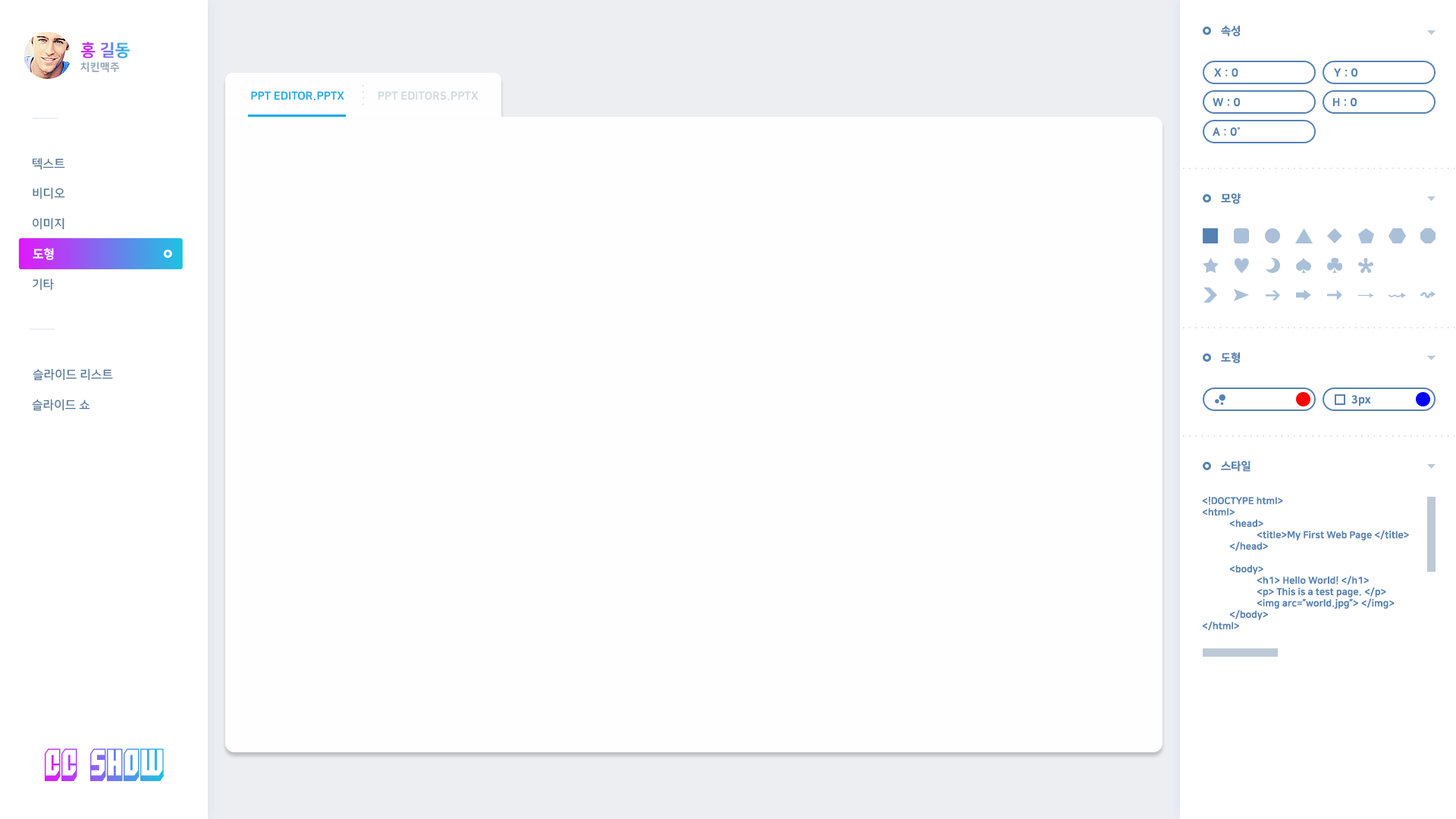
<style>
.page{position:relative;width:1456px;height:819px;background:#fefeff}
.page>*{position:absolute;margin:0}
.t1{font:11.1px "NanumSquareEB";color:#5682b2}
.t2{font:16.7px "NanumSquareEB";text-transform:uppercase}
.t3{font:10.6px "NanumSquareEB";letter-spacing:0.025em;color:#94a8ba;text-transform:uppercase}
.t4{font:11.1px "NanumSquareEB";color:#12aaeb;text-transform:uppercase}
.t5{font:11.1px "NanumSquareEB";color:#cfd9e0;text-transform:uppercase}
.t6{font:12.1px "NanumSquareB";color:#597a96;text-transform:uppercase}
.t7{font:12.1px "NanumSquareEB";color:#ffffff;text-transform:uppercase}
.t8{font:9.5px "NanumSquareEB";color:#5682b2}
.t9{font:31.6px "Blockt"}
</style>
<div class="page">
<p class="t1" style="left:1221px;top:25px;width:19px;height:11px">속성</p>
<p class="t2" style="left:80px;top:42px;width:50px;height:16px">홍 길동</p>
<p class="t3" style="left:80px;top:61px;width:40px;height:12px">치킨맥주</p>
<p class="t1" style="left:1214px;top:68px;width:24px;height:9px">X : 0</p>
<p class="t1" style="left:1334px;top:68px;width:23px;height:9px">Y : 0</p>
<p class="t4" style="left:251px;top:91px;width:93px;height:10px">PPT editor.pptx</p>
<p class="t5" style="left:378px;top:91px;width:101px;height:10px">PPT EDITORS.PPTX</p>
<p class="t1" style="left:1213px;top:98px;width:27px;height:9px">W : 0</p>
<p class="t1" style="left:1333px;top:98px;width:24px;height:9px">H : 0</p>
<p class="t1" style="left:1213px;top:127px;width:27px;height:9px">A : 0˚</p>
<p class="t6" style="left:32px;top:158px;width:33px;height:12px">텍스트</p>
<p class="t6" style="left:33px;top:187px;width:32px;height:12px">비디오</p>
<p class="t1" style="left:1221px;top:193px;width:20px;height:11px">모양</p>
<p class="t6" style="left:33px;top:218px;width:31px;height:12px">이미지</p>
<p class="t7" style="left:33px;top:248px;width:21px;height:12px">도형</p>
<p class="t6" style="left:33px;top:278px;width:21px;height:12px">기타</p>
<p class="t1" style="left:1221px;top:352px;width:19px;height:11px">도형</p>
<p class="t6" style="left:33px;top:369px;width:80px;height:12px">슬라이드 리스트</p>
<p class="t6" style="left:32px;top:399px;width:58px;height:12px">슬라이드 쇼</p>
<p class="t1" style="left:1351px;top:395px;width:20px;height:11px">3px</p>
<p class="t1" style="left:1221px;top:460px;width:29px;height:12px">스타일</p>
<p class="t8" style="left:1202px;top:497px;width:207px;height:134px">&lt;!DOCTYPE html&gt;<br>&lt;html&gt;<br> &lt;head&gt;<br>  &lt;title&gt;My First Web Page &lt;/title&gt;<br> &lt;/head&gt;<br><br> &lt;body&gt;<br>  &lt;h1&gt; Hello World! &lt;/h1&gt;<br>  &lt;p&gt; This is a test page. &lt;/p&gt;<br>  &lt;img arc=”world.jpg”&gt; &lt;/img&gt;<br> &lt;/body&gt;<br>&lt;/html&gt;</p>
<p class="t9" style="left:44px;top:748px;width:120px;height:34px">CC SHOW</p>
</div>
